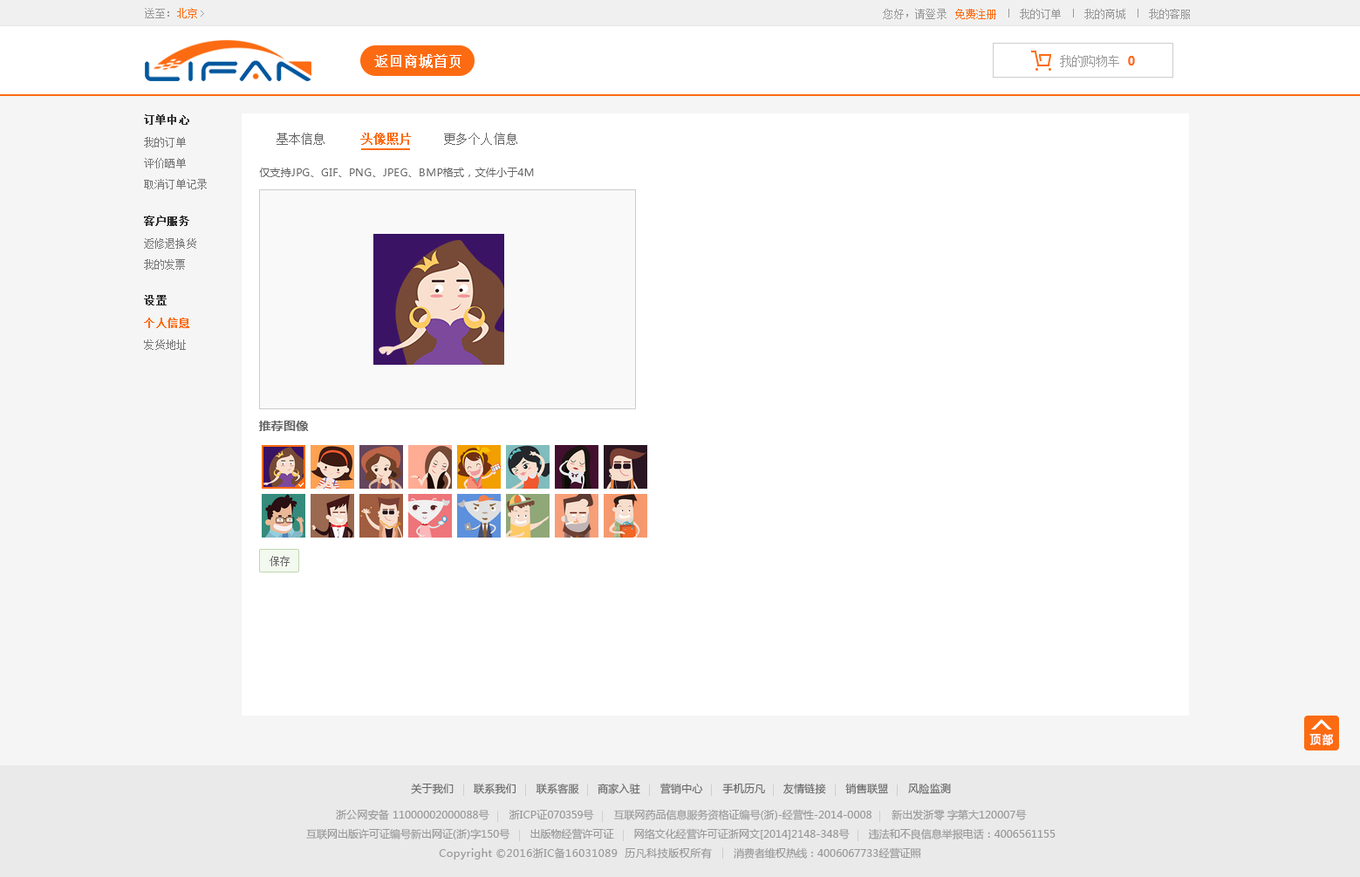
<style>
.page{position:relative;width:1360px;height:877px;background:#ffffff}
.page>*{position:absolute;margin:0}
.t1{font:10.3px "SimSun";letter-spacing:0.02em;color:#999999}
.t2{font:10.3px "SimSun";letter-spacing:0.02em;color:#fc6b12}
.t3{font:10.7px "SimSun";letter-spacing:0.02em;color:#999999}
.t4{font:10.7px "SimSun";letter-spacing:0.02em;color:#fc6b12}
.t5{font:14px "SimSun";color:#ffffff;font-weight:bold}
.t6{font:12.2px "SimSun";letter-spacing:-0.06em;color:#999999}
.t7{font:12.2px "MicrosoftYaHei-Bold";letter-spacing:-0.06em;color:#fc6b12}
.t8{font:10.5px "SimSun";color:#333333;font-weight:bold}
.t9{font:10.5px "SimSun";color:#777777}
.t10{font:12.2px "SimSun";letter-spacing:0.02em;color:#666666}
.t11{font:12.2px "SimSun";letter-spacing:0.02em;color:#fc6b12;font-weight:bold}
.t12{font:10.5px "MicrosoftYaHei";letter-spacing:0.02em;color:#666666}
.t13{font:10.6px "SimSun";color:#333333;font-weight:bold}
.t14{font:10.6px "SimSun";color:#fc6b12;font-weight:bold}
.t15{font:10.6px "SimSun";color:#777777}
.t16{font:12.2px "MicrosoftYaHei-Bold";letter-spacing:0.02em;color:#666666}
.t17{font:10.5px "SimSun";letter-spacing:0.02em;color:#666666}
.t18{font:11.5px "MicrosoftYaHei";color:#ffffff;font-weight:bold;scale:0.91 1}
.t19{font:10.5px "MicrosoftYaHei";color:#999999}
.t20{font:10.5px "MicrosoftYaHei";letter-spacing:0.02em;color:#999999}
.t21{font:10.5px "MicrosoftYaHei";letter-spacing:-0.02em;color:#999999}
.t22{font:10.5px "MicrosoftYaHei";letter-spacing:0.04em;color:#999999}
</style>
<div class="page">
<p class="t1" style="left:145px;top:8px;width:52px;height:10px">送至：<span class="t2">北京</span></p>
<p class="t3" style="left:883px;top:9px;width:64px;height:10px">您好，请登录</p>
<p class="t4" style="left:955px;top:9px;width:41px;height:10px">免费注册</p>
<p class="t3" style="left:1020px;top:9px;width:41px;height:10px">我的订单</p>
<p class="t3" style="left:1084px;top:9px;width:41px;height:10px">我的商城</p>
<p class="t3" style="left:1149px;top:9px;width:41px;height:10px">我的客服</p>
<p class="t5" style="left:374px;top:54px;width:87px;height:14px">返回商城首页</p>
<p class="t6" style="left:1060px;top:55px;width:59px;height:12px">我的购物车</p>
<p class="t7" style="left:1128px;top:56px;width:7px;height:9px">0</p>
<p class="t8" style="left:144px;top:114px;width:45px;height:11px">订单中心</p>
<p class="t9" style="left:144px;top:137px;width:42px;height:10px">我的订单</p>
<p class="t10" style="left:277px;top:133px;width:48px;height:12px">基本信息</p>
<p class="t11" style="left:360px;top:133px;width:51px;height:12px">头像照片</p>
<p class="t10" style="left:444px;top:133px;width:73px;height:12px">更多个人信息</p>
<p class="t9" style="left:144px;top:158px;width:42px;height:10px">评价晒单</p>
<p class="t12" style="left:259px;top:167px;width:275px;height:10px">仅支持JPG、GIF、PNG、JPEG、BMP格式，文件小于4M</p>
<p class="t9" style="left:144px;top:179px;width:63px;height:10px">取消订单记录</p>
<p class="t8" style="left:144px;top:215px;width:45px;height:11px">客户服务</p>
<p class="t9" style="left:144px;top:238px;width:52px;height:11px">返修退换货</p>
<p class="t9" style="left:144px;top:259px;width:41px;height:11px">我的发票</p>
<p class="t13" style="left:144px;top:295px;width:23px;height:10px">设置</p>
<p class="t14" style="left:144px;top:318px;width:45px;height:10px">个人信息</p>
<p class="t15" style="left:144px;top:339px;width:42px;height:11px">发货地址</p>
<p class="t16" style="left:258px;top:420px;width:51px;height:11px">推荐图像</p>
<p class="t17" style="left:270px;top:556px;width:20px;height:10px">保存</p>
<p class="t18" style="left:1309px;top:734px;width:25px;height:12px">顶 部</p>
<p class="t12" style="left:411px;top:783px;width:540px;height:11px">关于我们      联系我们      联系客服     商家入驻      营销中心      手机历凡     友情链接      销售联盟      风险监测</p>
<p class="t19" style="left:336px;top:809px;width:691px;height:11px"><span class="t20">浙公网安备 </span>11000002000088<span class="t20">号      浙ICP证</span><span class="t21">070359号     </span>互联网药品信息服务资格证编号(<span class="t20">浙</span>)-经营性-2014-0008      新出发<span class="t20">浙</span>零 字第大120007号</p>
<p class="t19" style="left:306px;top:828px;width:750px;height:11px">互联网出版许可证编号新出网证(<span class="t20">浙</span>)字150号       出版物经营许可证       网络文化经营许可证<span class="t20">浙</span>网文[2014]2148-348号       违法和不良信息举报电话：4006561155</p>
<p class="t22" style="left:439px;top:847px;width:482px;height:12px"><span class="t19"><br><br></span>Copyright ©2016浙IC备16031089  历凡科技版权所有<span class="t19">       消费者维权热线：4006067733经营证照</span></p>
</div>
